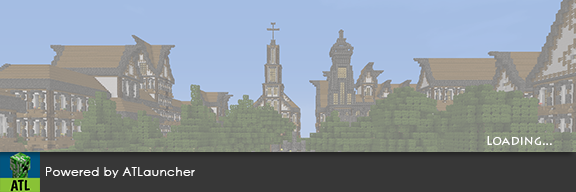
<style>
.page{position:relative;width:576px;height:192px}
.page>*{position:absolute;margin:0}
.t1{font:12px "LithosPro-Regular";letter-spacing:0.03em;color:#ffffff}
.t2{font:12px "CenturyGothic";letter-spacing:0.03em;color:#ffffff}
</style>
<div class="page">
<p class="t1" style="left:487px;top:136px;width:65px;height:9px">Loading...</p>
<p class="t2" style="left:46px;top:167px;width:149px;height:11px">Powered by ATLauncher</p>
</div>
